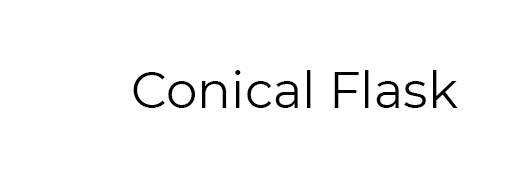
<style>
.page{position:relative;width:527px;height:180px;background:#ffffff}
.page>*{position:absolute;margin:0}
.t1{font:50px "Montserrat-Regular";color:#000000}
</style>
<div class="page">
<p class="t1" style="left:133px;top:70px;width:325px;height:38px">Conical Flask</p>
</div>
